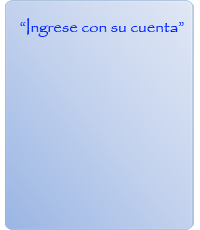
<style>
.page{position:relative;width:200px;height:230px}
.page>*{position:absolute;margin:0}
.t1{font:16.7px "Papyrus-Regular";color:#0024ff}
</style>
<div class="page">
<p class="t1" style="left:20px;top:18px;width:164px;height:19px">“Ingrese con su cuenta”</p>
</div>
